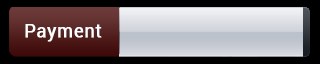
<style>
.page{position:relative;width:320px;height:64px;background:#000000}
.page>*{position:absolute;margin:0}
.t1{font:18px "Roboto-Regular";letter-spacing:0.025em;color:#ffffff;font-weight:bold}
</style>
<div class="page">
<p class="t1" style="left:25px;top:24px;width:77px;height:18px">Payment</p>
</div>
